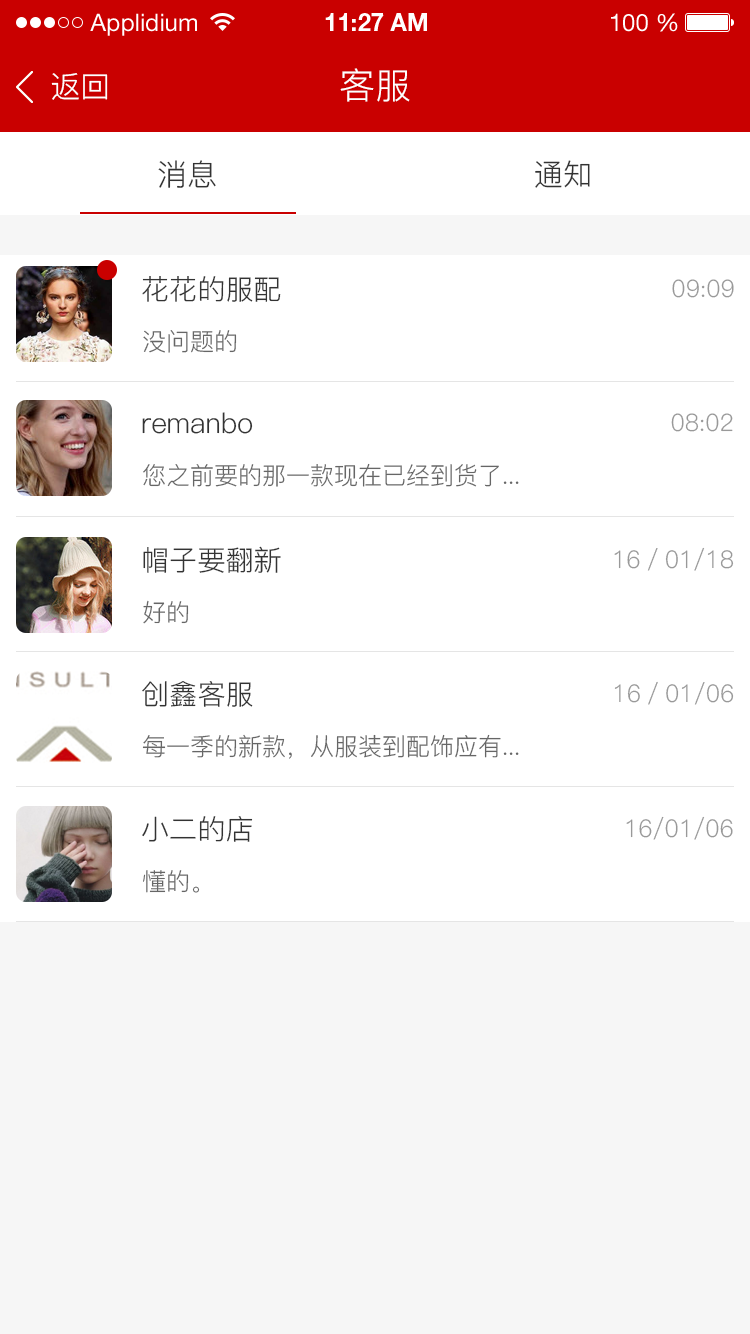
<style>
.page{position:relative;width:750px;height:1334px;background:#ffffff}
.page>*{position:absolute;margin:0}
.t1{font:24px "HelveticaNeueLTStd-Roman";color:#ffffff}
.t2{font:24px "HelveticaNeueLTStd-Bd";color:#ffffff}
.t3{font:30px "PingFang-SC-Regular";color:#ffffff}
.t4{font:36px "PingFang-SC-Regular";color:#ffffff}
.t5{font:30px "PingFang-SC-Regular";color:#333333}
.t6{font:28px "PingFang-SC-Regular";color:#333333}
.t7{font:24px "PingFang-SC-Regular";color:#999999}
.t8{font:24.3px "PingFang-SC-Regular";color:#666666}
.t9{font:24.3px "PingFang-SC-Regular";color:#999999}
</style>
<div class="page">
<p class="t1" style="left:90px;top:13px;width:107px;height:23px">Applidium</p>
<p class="t2" style="left:325px;top:13px;width:102px;height:18px">11:27 AM</p>
<p class="t1" style="left:611px;top:13px;width:67px;height:19px">100 %</p>
<p class="t3" style="left:51px;top:73px;width:57px;height:27px">返回</p>
<p class="t4" style="left:340px;top:68px;width:70px;height:34px">客服</p>
<p class="t5" style="left:158px;top:160px;width:58px;height:28px">消息</p>
<p class="t5" style="left:535px;top:160px;width:55px;height:28px">通知</p>
<p class="t6" style="left:142px;top:276px;width:139px;height:26px">花花的服配</p>
<p class="t7" style="left:672px;top:279px;width:62px;height:19px">09:09</p>
<p class="t8" style="left:143px;top:330px;width:94px;height:23px">没问题的</p>
<p class="t6" style="left:142px;top:412px;width:111px;height:22px">remanbo</p>
<p class="t7" style="left:671px;top:413px;width:62px;height:19px">08:02</p>
<p class="t8" style="left:143px;top:463px;width:376px;height:24px">您之前要的那一款现在已经到货了...</p>
<p class="t6" style="left:143px;top:546px;width:138px;height:27px">帽子要翻新</p>
<p class="t9" style="left:614px;top:547px;width:120px;height:24px">16／01/18</p>
<p class="t8" style="left:143px;top:600px;width:46px;height:24px">好的</p>
<p class="t6" style="left:142px;top:681px;width:111px;height:26px">创鑫客服</p>
<p class="t9" style="left:614px;top:681px;width:120px;height:24px">16／01/06</p>
<p class="t8" style="left:142px;top:734px;width:377px;height:25px">每一季的新款，从服装到配饰应有...</p>
<p class="t6" style="left:142px;top:816px;width:111px;height:26px">小二的店</p>
<p class="t9" style="left:626px;top:816px;width:107px;height:24px">16/01/06</p>
<p class="t8" style="left:143px;top:870px;width:57px;height:23px">懂的。</p>
</div>
